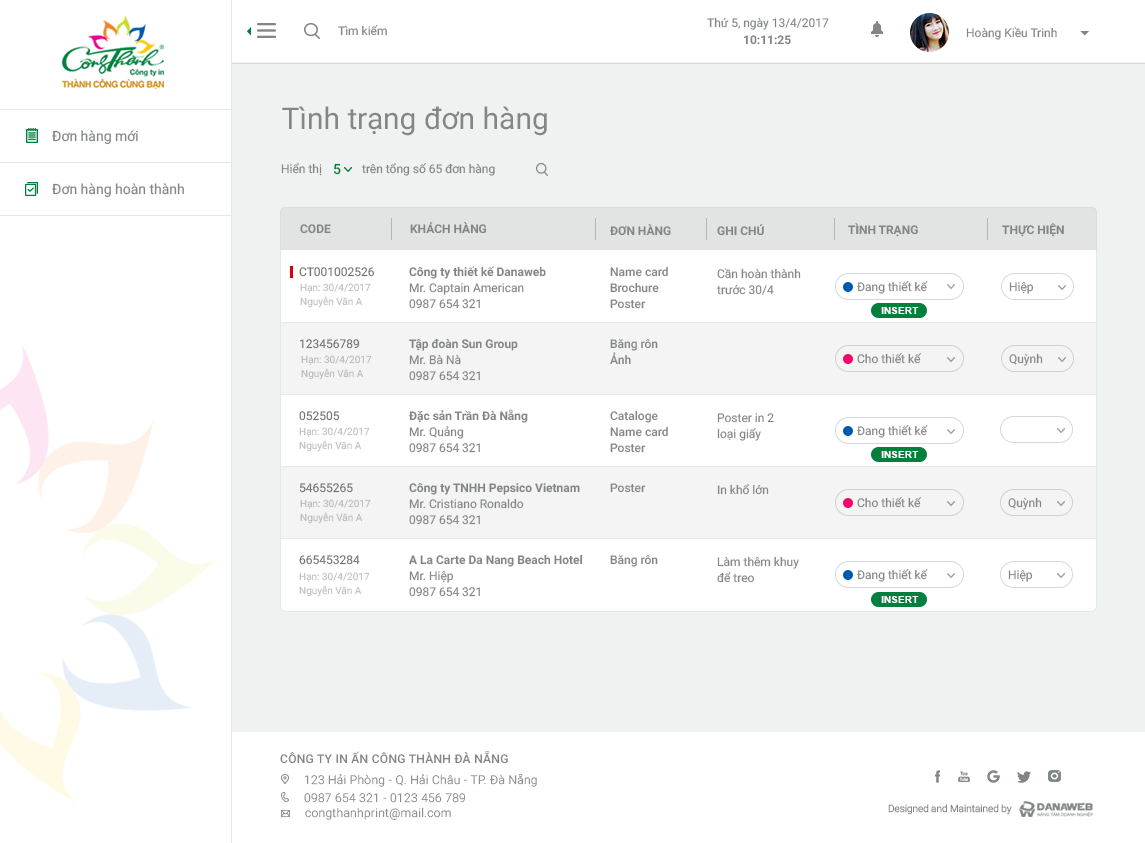
<style>
.page{position:relative;width:1145px;height:843px;background:#ffffff}
.page>*{position:absolute;margin:0}
.t1{font:12px "Roboto-Regular";color:#828785}
.t2{font:12px "Roboto-Bold";color:#828785}
.t3{font:30px "Roboto-Regular";color:#828785}
.t4{font:14px "Roboto-Regular";color:#828785}
.t5{font:12px "Roboto-Regular";color:#6f7472}
.t6{font:14px "Roboto-Medium";color:#007f3d}
.t7{font:12px "Roboto-Bold";color:#6f7472}
.t8{font:12px "Roboto-Bold";color:#717372}
.t9{font:12px/16px "Roboto-Regular";color:#6f7472}
.t10{font:12px/16px "Roboto-Bold";color:#6f7472}
.t11{font:12px/16px "Roboto-Medium";color:#6f7472}
.t12{font:12px/16px "Roboto-Regular";color:#828785}
.t13{font:10px "Roboto-Regular";color:#bfc1c0}
.t14{font:10px "Arial-BoldMT";letter-spacing:0.01em;color:#ffffff}
.t15{font:10px "Roboto-Regular";color:#b9bbba}
.t16{font:12px "Roboto-Medium";color:#6f7472}
.t17{font:12px "Roboto-Medium";letter-spacing:0.025em;color:#6f7472}
.t18{font:12px "Roboto-Light";letter-spacing:0.025em}
.t19{font:10px "Roboto-Light";color:#868786}
</style>
<div class="page">
<p class="t1" style="left:707px;top:17px;width:122px;height:13px">Thứ 5, ngày 13/4/2017</p>
<p class="t1" style="left:338px;top:25px;width:49px;height:11px">Tìm kiếm</p>
<p class="t1" style="left:966px;top:27px;width:91px;height:13px">Hoàng Kiều Trinh</p>
<p class="t2" style="left:743px;top:35px;width:48px;height:10px">10:11:25</p>
<p class="t3" style="left:282px;top:106px;width:265px;height:30px">Tình trạng đơn hàng</p>
<p class="t4" style="left:52px;top:130px;width:86px;height:15px">Đơn hàng mới</p>
<p class="t5" style="left:281px;top:162px;width:41px;height:14px">Hiển thị</p>
<p class="t6" style="left:334px;top:163px;width:7px;height:12px">5</p>
<p class="t1" style="left:361px;top:162px;width:134px;height:14px">trên tổng số 65 đơn hàng</p>
<p class="t4" style="left:52px;top:183px;width:132px;height:15px">Đơn hàng hoàn thành</p>
<p class="t7" style="left:410px;top:222px;width:77px;height:12px">KHÁCH HÀNG</p>
<p class="t7" style="left:300px;top:224px;width:31px;height:10px">CODE</p>
<p class="t8" style="left:610px;top:224px;width:61px;height:12px">ĐƠN HÀNG</p>
<p class="t8" style="left:717px;top:224px;width:47px;height:12px">GHI CHÚ</p>
<p class="t8" style="left:848px;top:223px;width:70px;height:14px">TÌNH TRẠNG</p>
<p class="t8" style="left:1002px;top:223px;width:62px;height:14px">THỰC HIỆN</p>
<p class="t5" style="left:299px;top:267px;width:76px;height:10px">CT001002526</p>
<p class="t9" style="left:409px;top:266px;width:137px;height:43px"><span class="t10">Công ty thiết kế Danaweb<br></span>Mr. Captain American <br>0987 654 321</p>
<p class="t11" style="left:610px;top:267px;width:58px;height:42px">Name card<br>Brochure<br>Poster</p>
<p class="t12" style="left:716px;top:268px;width:85px;height:27px">Cần hoàn thành<br>trước 30/4</p>
<p class="t1" style="left:857px;top:281px;width:71px;height:13px">Đang thiết kế</p>
<p class="t1" style="left:1009px;top:281px;width:25px;height:13px">Hiệp</p>
<p class="t13" style="left:300px;top:283px;width:71px;height:10px">Hạn: 30/4/2017</p>
<p class="t13" style="left:300px;top:296px;width:63px;height:12px">Nguyễn Văn A</p>
<p class="t14" style="left:881px;top:307px;width:38px;height:7px">INSERT</p>
<p class="t5" style="left:299px;top:339px;width:61px;height:10px">123456789</p>
<p class="t9" style="left:409px;top:338px;width:109px;height:43px"><span class="t10">Tập đoàn Sun Group<br></span>Mr. Bà Nà<br>0987 654 321</p>
<p class="t11" style="left:610px;top:339px;width:48px;height:26px">Băng rôn<br>Ảnh</p>
<p class="t1" style="left:857px;top:353px;width:64px;height:11px">Cho thiết kế</p>
<p class="t5" style="left:1009px;top:353px;width:34px;height:13px">Quỳnh</p>
<p class="t15" style="left:301px;top:355px;width:71px;height:10px">Hạn: 30/4/2017</p>
<p class="t15" style="left:301px;top:368px;width:63px;height:12px">Nguyễn Văn A</p>
<p class="t5" style="left:299px;top:411px;width:41px;height:10px">052505</p>
<p class="t9" style="left:409px;top:409px;width:119px;height:44px"><span class="t10">Đặc sản Trần Đà Nẵng<br></span>Mr. Quảng <br>0987 654 321</p>
<p class="t11" style="left:610px;top:410px;width:58px;height:43px">Cataloge<br>Name card<br>Poster</p>
<p class="t12" style="left:717px;top:413px;width:57px;height:28px">Poster in 2<br>loại giấy</p>
<p class="t1" style="left:857px;top:425px;width:71px;height:13px">Đang thiết kế</p>
<p class="t13" style="left:299px;top:427px;width:71px;height:10px">Hạn: 30/4/2017</p>
<p class="t13" style="left:299px;top:440px;width:63px;height:12px">Nguyễn Văn A</p>
<p class="t14" style="left:881px;top:451px;width:38px;height:7px">INSERT</p>
<p class="t5" style="left:299px;top:483px;width:54px;height:10px">54655265</p>
<p class="t9" style="left:409px;top:483px;width:171px;height:42px"><span class="t10">Công ty TNHH Pepsico Vietnam<br></span>Mr. Cristiano Ronaldo <br>0987 654 321</p>
<p class="t16" style="left:610px;top:483px;width:36px;height:10px">Poster</p>
<p class="t5" style="left:717px;top:483px;width:52px;height:12px">In khổ lớn</p>
<p class="t1" style="left:857px;top:497px;width:64px;height:11px">Cho thiết kế</p>
<p class="t5" style="left:1008px;top:497px;width:34px;height:13px">Quỳnh</p>
<p class="t15" style="left:300px;top:499px;width:71px;height:10px">Hạn: 30/4/2017</p>
<p class="t15" style="left:300px;top:512px;width:63px;height:12px">Nguyễn Văn A</p>
<p class="t5" style="left:299px;top:555px;width:61px;height:10px">665453284</p>
<p class="t10" style="left:409px;top:554px;width:174px;height:43px">A La Carte Da Nang Beach Hotel<br><span class="t9">Mr. Hiệp <br>0987 654 321</span></p>
<p class="t16" style="left:610px;top:555px;width:48px;height:12px">Băng rôn</p>
<p class="t12" style="left:717px;top:556px;width:82px;height:27px">Làm thêm khuy<br>để treo</p>
<p class="t1" style="left:857px;top:569px;width:71px;height:13px">Đang thiết kế</p>
<p class="t1" style="left:1008px;top:569px;width:25px;height:13px">Hiệp</p>
<p class="t13" style="left:299px;top:572px;width:71px;height:10px">Hạn: 30/4/2017</p>
<p class="t13" style="left:299px;top:585px;width:63px;height:12px">Nguyễn Văn A</p>
<p class="t14" style="left:881px;top:596px;width:38px;height:7px">INSERT</p>
<p class="t17" style="left:280px;top:751px;width:228px;height:13px">CÔNG TY IN ẤN CÔNG THÀNH ĐÀ NẴNG</p>
<p class="t18" style="left:304px;top:773px;width:233px;height:14px">123 Hải Phòng - Q. Hải Châu - TP. Đà Nẵng</p>
<p class="t18" style="left:304px;top:793px;width:162px;height:10px">0987 654 321 - 0123 456 789</p>
<p class="t18" style="left:305px;top:807px;width:146px;height:13px">congthanhprint@mail.com</p>
<p class="t19" style="left:888px;top:804px;width:124px;height:11px">Designed and Maintained by</p>
</div>
